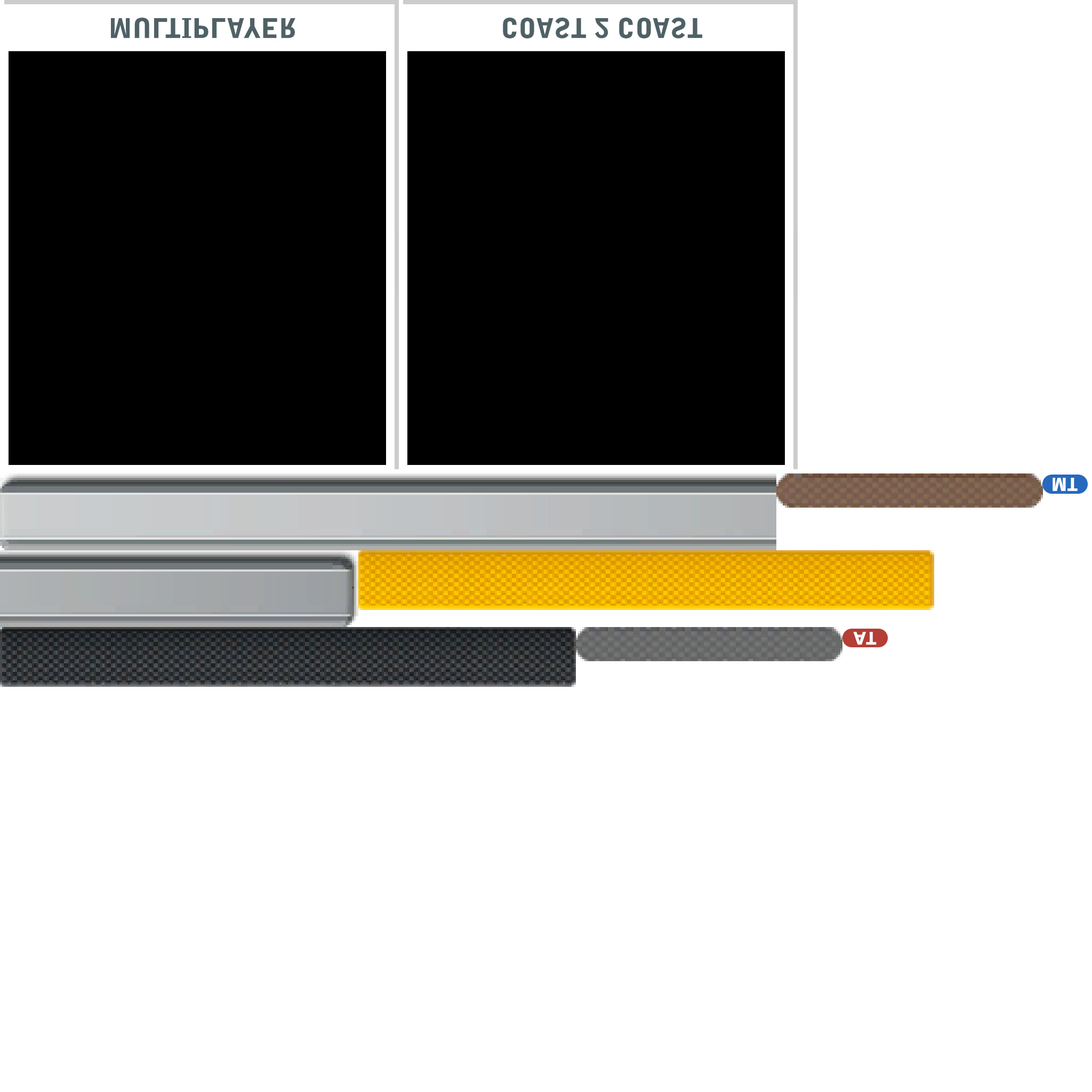
<style>
.page{position:relative;width:1092px;height:1092px;background:#ffffff}
.page>*{position:absolute;margin:0}
.t1{font:27px "BellGothicStd-Black";color:#4f6166}
.t2{font:16.9px "RodinPro-EB";color:#ffffff}
.t3{font:16.4px "RodinPro-EB";color:#ffffff}
</style>
<div class="page">
<p class="t1" style="left:111px;top:18px;width:184px;height:20px">MULTIPLAYER</p>
<p class="t1" style="left:503px;top:18px;width:199px;height:20px">COAST 2 COAST</p>
<p class="t2" style="left:1053px;top:478px;width:25px;height:13px">MT</p>
<p class="t3" style="left:853px;top:632px;width:24px;height:13px">AT</p>
</div>
